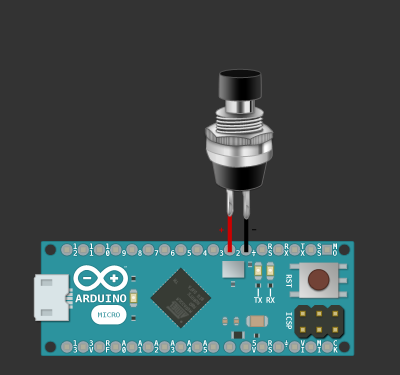
<style>
.page{position:relative;width:400px;height:375px;background:#333333}
.page>*{position:absolute;margin:0}
.t1{font:8.6px "Menlo-Bold";color:#cc0000}
.t2{font:8.6px "Menlo-Bold";color:#000000}
.t3{font:7.4px "Menlo-Bold";color:#ffffff}
.t4{font:7.4px "Menlo-Bold"}
.t5{font:2.1px "Menlo-Bold"}
.t6{font:4.2px "Menlo-Regular";color:#555852}
.t7{font:10.4px "Menlo-Bold";color:#ffffff;scale:1.19 1}
.t8{font:4.2px "Menlo-Regular"}
.t9{font:6.6px "Menlo-Regular";scale:1.12 1}
</style>
<div class="page">
<p class="t1" style="left:219px;top:227px;width:5px;height:6px">+</p>
<p class="t2" style="left:252px;top:229px;width:5px;height:2px">-</p>
<p class="t3" style="left:73px;top:243px;width:4px;height:6px">1</p>
<p class="t3" style="left:89px;top:243px;width:5px;height:6px">1</p>
<p class="t3" style="left:106px;top:243px;width:4px;height:6px">1</p>
<p class="t3" style="left:268px;top:243px;width:5px;height:6px">R</p>
<p class="t3" style="left:284px;top:243px;width:5px;height:6px">R</p>
<p class="t4" style="left:300px;top:243px;width:5px;height:6px">T</p>
<p class="t3" style="left:317px;top:243px;width:4px;height:6px">S</p>
<p class="t3" style="left:333px;top:243px;width:4px;height:6px">M</p>
<p class="t4" style="left:73px;top:250px;width:4px;height:6px">2</p>
<p class="t3" style="left:89px;top:250px;width:5px;height:6px">1</p>
<p class="t3" style="left:106px;top:250px;width:4px;height:6px">0</p>
<p class="t4" style="left:122px;top:250px;width:4px;height:6px">9</p>
<p class="t4" style="left:138px;top:250px;width:4px;height:6px">8</p>
<p class="t4" style="left:154px;top:250px;width:5px;height:6px">7</p>
<p class="t3" style="left:171px;top:250px;width:4px;height:6px">6</p>
<p class="t3" style="left:187px;top:250px;width:4px;height:6px">5</p>
<p class="t4" style="left:203px;top:250px;width:4px;height:6px">4</p>
<p class="t3" style="left:219px;top:250px;width:5px;height:6px">3</p>
<p class="t4" style="left:236px;top:250px;width:4px;height:6px">2</p>
<p class="t3" style="left:268px;top:250px;width:4px;height:6px">S</p>
<p class="t3" style="left:284px;top:250px;width:5px;height:6px">X</p>
<p class="t3" style="left:300px;top:250px;width:5px;height:6px">X</p>
<p class="t3" style="left:317px;top:250px;width:4px;height:6px">S</p>
<p class="t3" style="left:333px;top:250px;width:4px;height:6px">O</p>
<p class="t5" style="left:124px;top:266px;width:3px;height:2px">TM</p>
<p class="t6" style="left:173px;top:278px;width:28px;height:27px;rotate:-135deg">ROBOTS      TM</p>
<p class="t3" style="left:286px;top:274px;width:6px;height:14px;rotate:90deg">RST</p>
<p class="t7" style="left:75px;top:294px;width:52px;height:9px">ARDUINO</p>
<p class="t8" style="left:188px;top:285px;width:17px;height:16px;rotate:-135deg">BIG DATA</p>
<p class="t6" style="left:175px;top:297px;width:18px;height:17px;rotate:-135deg">MEGA32U4</p>
<p class="t6" style="left:189px;top:302px;width:8px;height:7px;rotate:-135deg">RBD</p>
<p class="t3" style="left:254px;top:297px;width:9px;height:6px">TX</p>
<p class="t3" style="left:266px;top:297px;width:9px;height:6px">RX</p>
<p class="t9" style="left:98px;top:312px;width:22px;height:6px">MICRO</p>
<p class="t3" style="left:286px;top:312px;width:6px;height:17px;rotate:90deg">ICSP</p>
<p class="t4" style="left:73px;top:340px;width:4px;height:6px">1</p>
<p class="t4" style="left:89px;top:340px;width:4px;height:6px">3</p>
<p class="t3" style="left:106px;top:340px;width:4px;height:6px">R</p>
<p class="t4" style="left:121px;top:340px;width:5px;height:6px">A</p>
<p class="t4" style="left:138px;top:340px;width:5px;height:6px">A</p>
<p class="t3" style="left:154px;top:340px;width:5px;height:6px">A</p>
<p class="t3" style="left:170px;top:340px;width:5px;height:6px">A</p>
<p class="t4" style="left:187px;top:340px;width:5px;height:6px">A</p>
<p class="t4" style="left:203px;top:340px;width:5px;height:6px">A</p>
<p class="t3" style="left:252px;top:340px;width:4px;height:6px">5</p>
<p class="t3" style="left:268px;top:340px;width:5px;height:6px">R</p>
<p class="t3" style="left:300px;top:340px;width:5px;height:6px">V</p>
<p class="t3" style="left:317px;top:340px;width:4px;height:6px">M</p>
<p class="t4" style="left:333px;top:340px;width:4px;height:6px">C</p>
<p class="t4" style="left:73px;top:347px;width:4px;height:6px">3</p>
<p class="t3" style="left:89px;top:347px;width:5px;height:6px">V</p>
<p class="t3" style="left:106px;top:347px;width:4px;height:6px">F</p>
<p class="t3" style="left:122px;top:347px;width:4px;height:6px">0</p>
<p class="t4" style="left:138px;top:347px;width:4px;height:6px">1</p>
<p class="t3" style="left:154px;top:347px;width:5px;height:6px">2</p>
<p class="t4" style="left:171px;top:347px;width:4px;height:6px">3</p>
<p class="t4" style="left:187px;top:347px;width:4px;height:6px">4</p>
<p class="t3" style="left:203px;top:347px;width:4px;height:6px">5</p>
<p class="t4" style="left:252px;top:347px;width:4px;height:6px">V</p>
<p class="t3" style="left:268px;top:347px;width:4px;height:6px">S</p>
<p class="t3" style="left:301px;top:347px;width:4px;height:6px">I</p>
<p class="t3" style="left:317px;top:347px;width:4px;height:6px">I</p>
<p class="t3" style="left:333px;top:347px;width:5px;height:6px">K</p>
</div>
